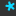
<style>
.page{position:relative;width:16px;height:16px;background:#333333}
.page>*{position:absolute;margin:0}
.t1{font:27px "AlteHaasGrotesk_Bold";color:#0cd7ff}
</style>
<div class="page">
<p class="t1" style="left:5px;top:1px;width:10px;height:10px;rotate:-15deg">*</p>
</div>
